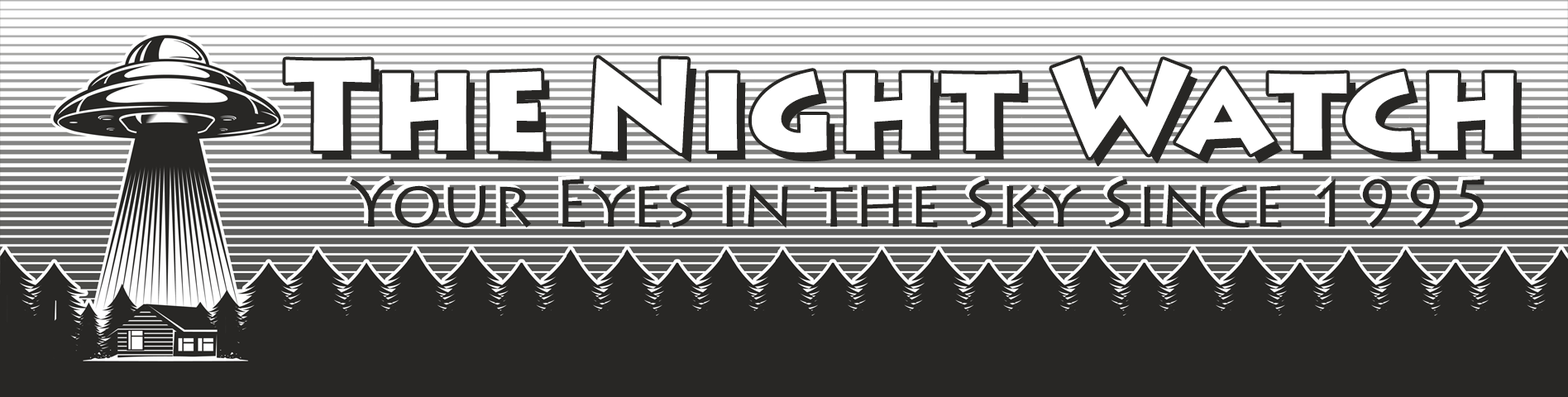
<style>
.page{position:relative;width:1568px;height:397px;background:#282725}
.page>*{position:absolute;margin:0}
.t1{font:127.8px "LithosPro-Black";color:#ffffff}
.t2{font:66.8px "LithosPro-Regular";color:#282725}
</style>
<div class="page">
<p class="t1" style="left:285px;top:58px;width:1229px;height:99px">The Night Watch</p>
<p class="t2" style="left:350px;top:178px;width:1134px;height:50px">Your Eyes in the Sky Since 1995</p>
</div>
